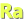
<style>
.page{position:relative;width:24px;height:24px;background:#ffffff}
.page>*{position:absolute;margin:0}
.t1{font:20.3px "MicrosoftPhagsPa-Bold";color:#e9ff56}
</style>
<div class="page">
<p class="t1" style="left:0px;top:3px;width:23px;height:15px">Ra</p>
</div>
